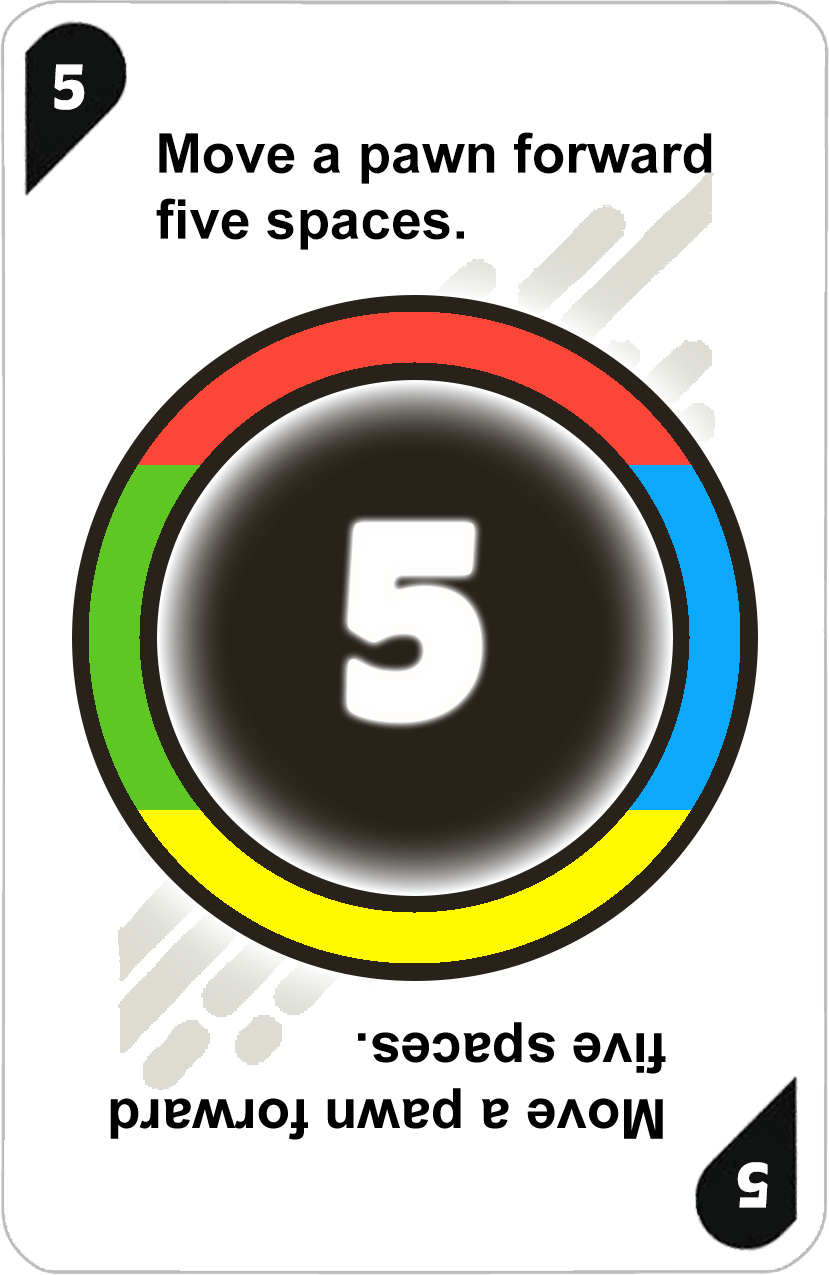
<style>
.page{position:relative;width:829px;height:1275px;background:#ffffff}
.page>*{position:absolute;margin:0}
.t1{font:72px "AdGothic-Regular";color:#ffffff}
.t2{font:55px "Arial-BoldMT";color:#000000}
.t3{font:300px "AdGothic-Regular";color:#ffffff}
</style>
<div class="page">
<p class="t1" style="left:54px;top:64px;width:31px;height:46px">5</p>
<p class="t2" style="left:156px;top:132px;width:556px;height:118px">Move a pawn forward <br>five spaces.</p>
<p class="t3" style="left:352px;top:527px;width:125px;height:190px">5</p>
</div>
